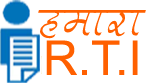
<style>
.page{position:relative;width:146px;height:83px;background:#ffffff}
.page>*{position:absolute;margin:0}
.t1{font:48px "Aman-Italic";color:#ff6000}
.t2{font:48px "ArialMT";color:#ff6000}
</style>
<div class="page">
<p class="t1" style="left:38px;top:10px;width:108px;height:29px">gekjk</p>
<p class="t2" style="left:46px;top:40px;width:92px;height:35px">R.T.I</p>
</div>
